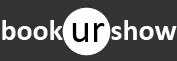
<style>
.page{position:relative;width:177px;height:61px;background:#333333}
.page>*{position:absolute;margin:0}
.t1{font:30px "Calibri-Bold";color:#ffffff}
.t2{font:40px "Calibri";color:#000000}
</style>
<div class="page">
<p class="t1" style="left:2px;top:20px;width:175px;height:20px">book       show</p>
<p class="t2" style="left:72px;top:23px;width:33px;height:19px">ur</p>
</div>
